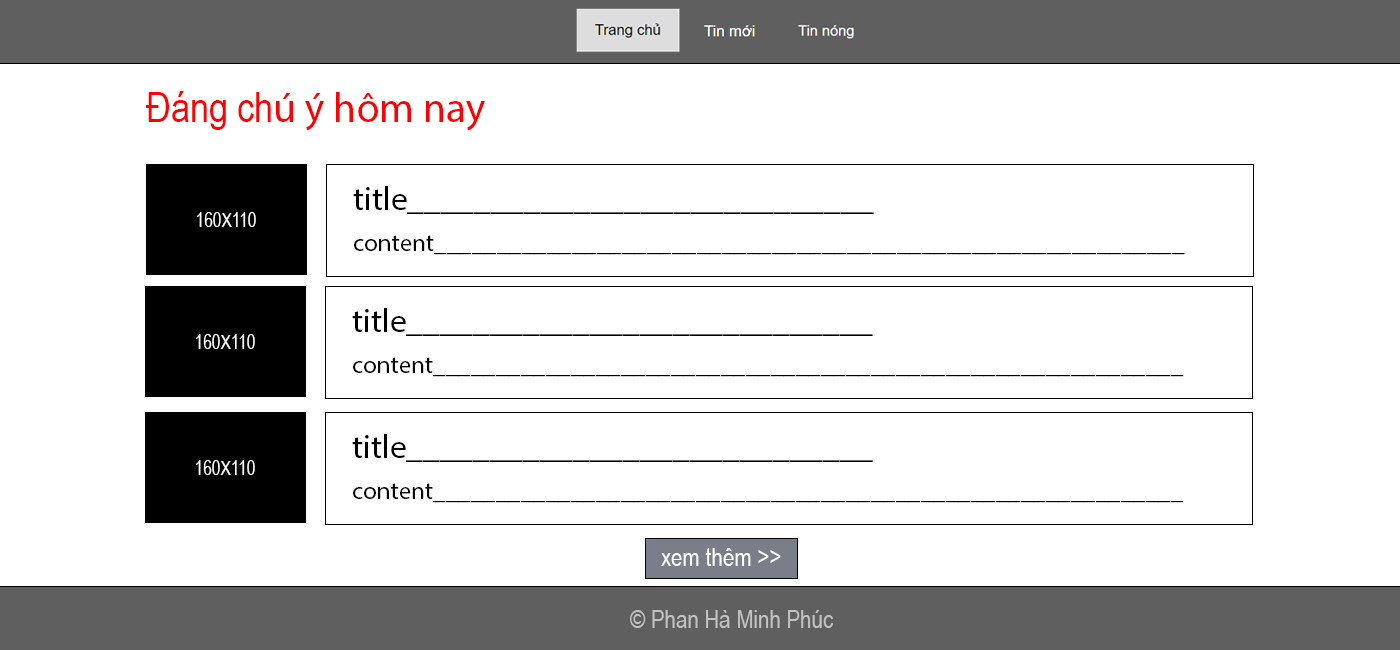
<style>
.page{position:relative;width:1400px;height:650px;background:#ffffff}
.page>*{position:absolute;margin:0}
.t1{font:41.7px "MyriadPro-Regular";color:#ff0004}
.t2{font:41.7px "ArialNarrow";color:#ff0004}
.t3{font:33.3px "MyriadPro-Regular";color:#000000}
.t4{font:18.9px "ArialNarrow";color:#ffffff}
.t5{font:18.9px "ArialNarrow";color:#000000}
.t6{font:25px "MyriadPro-Regular";color:#000000}
.t7{font:25.2px "ArialNarrow";color:#ffffff}
.t8{font:25px "ArialNarrow";color:#c2c2c2}
</style>
<div class="page">
<p class="t1" style="left:145px;top:91px;width:340px;height:40px"><span class="t2">Đáng ch</span>ú ý hôm nay</p>
<p class="t3" style="left:353px;top:186px;width:521px;height:28px">title____________________________</p>
<p class="t4" style="left:197px;top:212px;width:59px;height:15px"><span class="t5"><br></span>160X110</p>
<p class="t6" style="left:354px;top:235px;width:831px;height:20px">content____________________________________________________________</p>
<p class="t3" style="left:352px;top:308px;width:521px;height:28px">title____________________________</p>
<p class="t4" style="left:196px;top:334px;width:59px;height:15px"><span class="t5"><br></span>160X110</p>
<p class="t6" style="left:353px;top:357px;width:831px;height:20px">content____________________________________________________________</p>
<p class="t3" style="left:352px;top:434px;width:521px;height:28px">title____________________________</p>
<p class="t4" style="left:196px;top:460px;width:59px;height:15px"><span class="t5"><br></span>160X110</p>
<p class="t6" style="left:353px;top:483px;width:831px;height:20px">content____________________________________________________________</p>
<p class="t7" style="left:661px;top:548px;width:120px;height:18px">xem thêm &gt;&gt;</p>
<p class="t8" style="left:630px;top:610px;width:203px;height:18px">© Phan Hà Minh Phúc</p>
</div>
